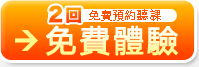
<style>
.page{position:relative;width:199px;height:67px}
.page>*{position:absolute;margin:0}
.t1{font:11px "MicrosoftYaHei";letter-spacing:0.1em;color:#ff5102}
.t2{font:30px "MicrosoftYaHei";letter-spacing:0.1em;font-weight:bold}
</style>
<div class="page">
<p class="t1" style="left:89px;top:9px;width:72px;height:12px">免費預約聽課</p>
<p class="t2" style="left:46px;top:25px;width:132px;height:31px">免費體驗</p>
</div>
